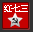
<style>
.page{position:relative;width:33px;height:32px;background:#c50000}
.page>*{position:absolute;margin:0}
.t1{font:10.4px "SimSun";letter-spacing:-0.25em;color:#ffffff}
</style>
<div class="page">
<p class="t1" style="left:4px;top:4px;width:24px;height:8px">红七三</p>
</div>
